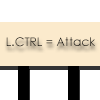
<style>
.page{position:relative;width:100px;height:100px;background:#ffffff}
.page>*{position:absolute;margin:0}
.t1{font:12px "CenturyGothic"}
</style>
<div class="page">
<p class="t1" style="left:6px;top:37px;width:89px;height:10px">L.CTRL = Attack</p>
</div>
